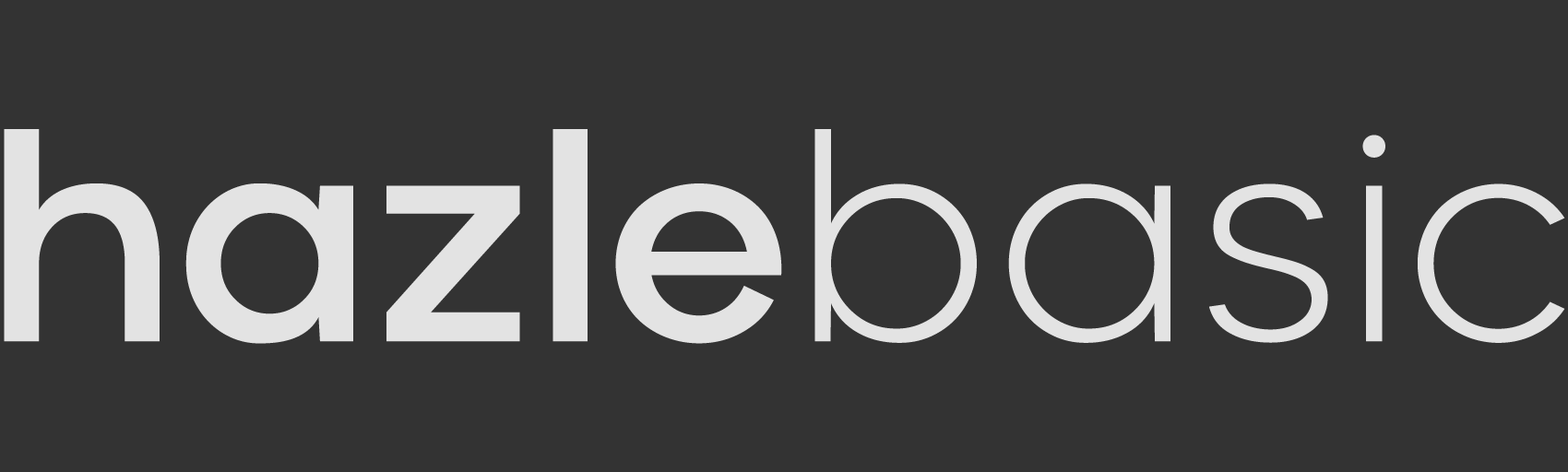
<style>
.page{position:relative;width:1568px;height:472px;background:#333333}
.page>*{position:absolute;margin:0}
.t1{font:282.7px "Neometric-Medium";color:#e3e3e3}
.t2{font:282.7px "Neometric-Light";color:#e3e3e3}
</style>
<div class="page">
<p class="t1" style="left:4px;top:129px;width:1561px;height:215px">hazle<span class="t2">basic</span></p>
</div>
